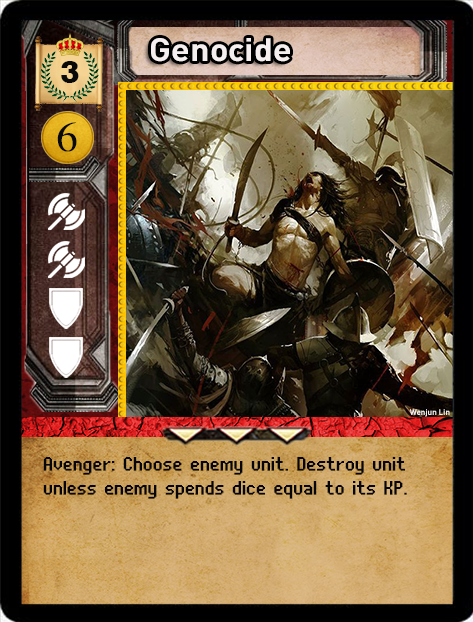
<style>
.page{position:relative;width:473px;height:622px}
.page>*{position:absolute;margin:0}
.t1{font:32px "DIN-Bold";color:#f6eff0;scale:1.06 1}
.t2{font:32px "Swiss721BT-Heavy";color:#090909}
.t3{font:40px "SimplifiedArabic";color:#090909;scale:1.05 1}
.t4{font:8px "DIN-Bold";color:#f6eff0}
.t5{font:24px/24px "UNDA-BitmapFine";letter-spacing:0.01em;color:#060606;font-weight:bold}
</style>
<div class="page">
<p class="t1" style="left:151px;top:38px;width:139px;height:24px">Genocide</p>
<p class="t2" style="left:61px;top:61px;width:18px;height:22px">3</p>
<p class="t3" style="left:57px;top:122px;width:20px;height:30px">6</p>
<p class="t4" style="left:409px;top:409px;width:41px;height:8px">Wenjun Lin</p>
<p class="t5" style="left:43px;top:457px;width:364px;height:42px">Avenger: Choose enemy unit. Destroy unit unless enemy spends dice equal to its KP.</p>
</div>
